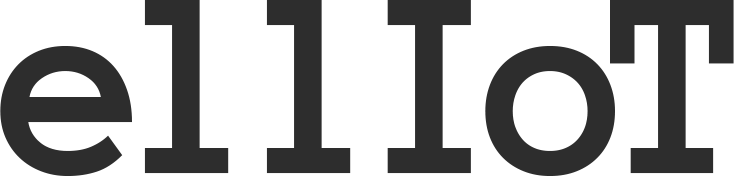
<style>
.page{position:relative;width:734px;height:176px;background:#ffffff}
.page>*{position:absolute;margin:0}
.t1{font:272px "AnonymousPro-Bold";letter-spacing:-0.1em;color:#2d2d2d}
</style>
<div class="page">
<p class="t1" style="left:0px;top:0px;width:734px;height:176px">ellIoT</p>
</div>
